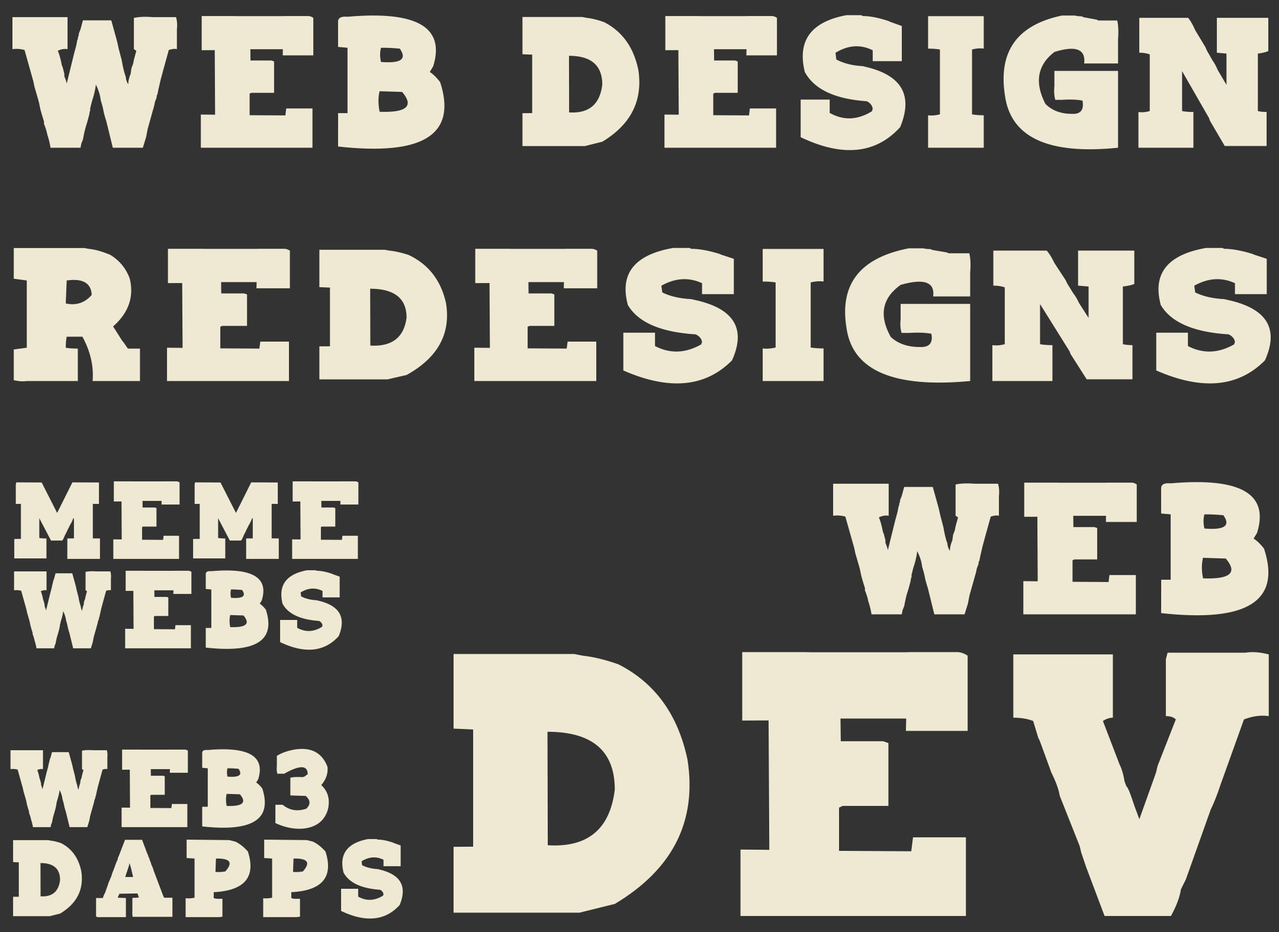
<style>
.page{position:relative;width:1279px;height:932px;background:#333333}
.page>*{position:absolute;margin:0}
.t1{font:146.9px "Playtoy-Regular";letter-spacing:0.1em;color:#efe9d3}
.t2{font:147.4px "Playtoy-Regular";letter-spacing:0.1em;color:#efe9d3;scale:1.09 1}
.t3{font:86.6px/89.9px "Playtoy-Regular";letter-spacing:0.1em;color:#efe9d3}
.t4{font:147.1px "Playtoy-Regular";letter-spacing:0.1em;color:#efe9d3}
.t5{font:294.1px "Playtoy-Regular";letter-spacing:0.1em;color:#efe9d3}
</style>
<div class="page">
<p class="t1" style="left:12px;top:15px;width:1257px;height:135px">WEB DESIGN</p>
<p class="t2" style="left:14px;top:248px;width:1257px;height:136px">REDESIGNS</p>
<p class="t3" style="left:14px;top:481px;width:345px;height:169px">MEME<br>WEBS</p>
<p class="t4" style="left:833px;top:482px;width:436px;height:134px">WEB</p>
<p class="t5" style="left:454px;top:652px;width:815px;height:264px">DEV</p>
<p class="t3" style="left:10px;top:749px;width:393px;height:170px">WEB3 <br>DAPPS</p>
</div>
